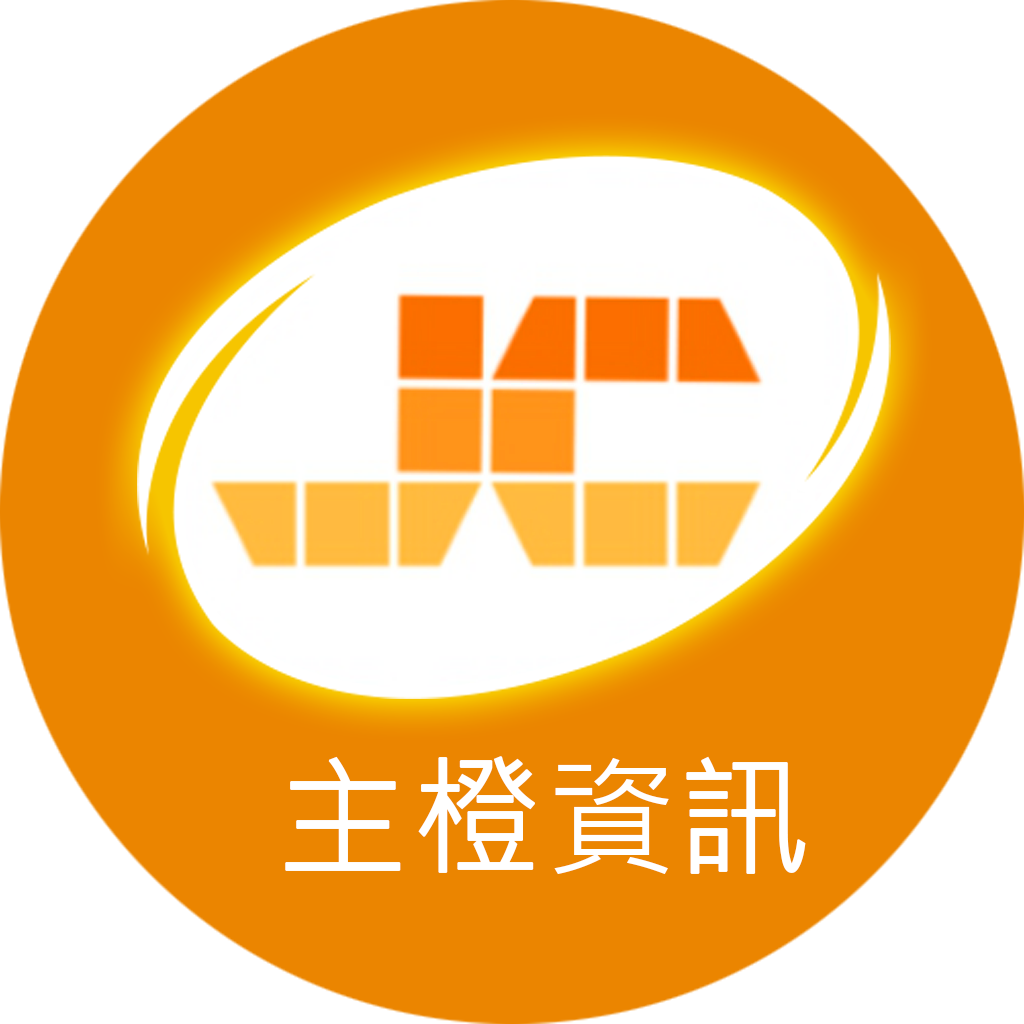
<style>
.page{position:relative;width:1024px;height:1024px;background:#eb8500}
.page>*{position:absolute;margin:0}
.t1{font:130px "MicrosoftJhengHeiRegular";color:#ffffff;font-weight:bold}
</style>
<div class="page">
<p class="t1" style="left:285px;top:756px;width:521px;height:119px">主橙資訊</p>
</div>
